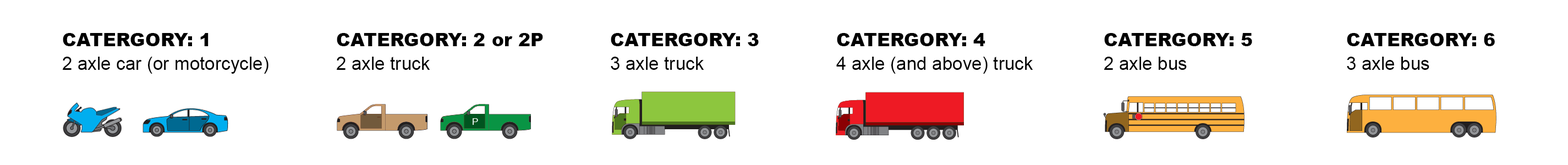
<style>
.page{position:relative;width:1568px;height:165px;background:#ffffff}
.page>*{position:absolute;margin:0}
.t1{font:18.3px "Arial-Black";color:#000000}
.t2{font:18.3px "ArialMT";color:#000000}
</style>
<div class="page">
<p class="t1" style="left:63px;top:33px;width:146px;height:13px">CATERGORY: 1</p>
<p class="t1" style="left:337px;top:33px;width:206px;height:13px">CATERGORY: 2 or 2P</p>
<p class="t1" style="left:611px;top:33px;width:148px;height:13px">CATERGORY: 3</p>
<p class="t1" style="left:837px;top:33px;width:148px;height:13px">CATERGORY: 4</p>
<p class="t1" style="left:1104px;top:33px;width:148px;height:13px">CATERGORY: 5</p>
<p class="t1" style="left:1347px;top:33px;width:148px;height:13px">CATERGORY: 6</p>
<p class="t2" style="left:63px;top:57px;width:205px;height:17px">2 axle car (or motorcycle)</p>
<p class="t2" style="left:337px;top:57px;width:93px;height:13px">2 axle truck</p>
<p class="t2" style="left:611px;top:57px;width:93px;height:13px">3 axle truck</p>
<p class="t2" style="left:836px;top:57px;width:197px;height:17px">4 axle (and above) truck</p>
<p class="t2" style="left:1104px;top:57px;width:83px;height:13px">2 axle bus</p>
<p class="t2" style="left:1347px;top:57px;width:82px;height:13px">3 axle bus</p>
</div>
